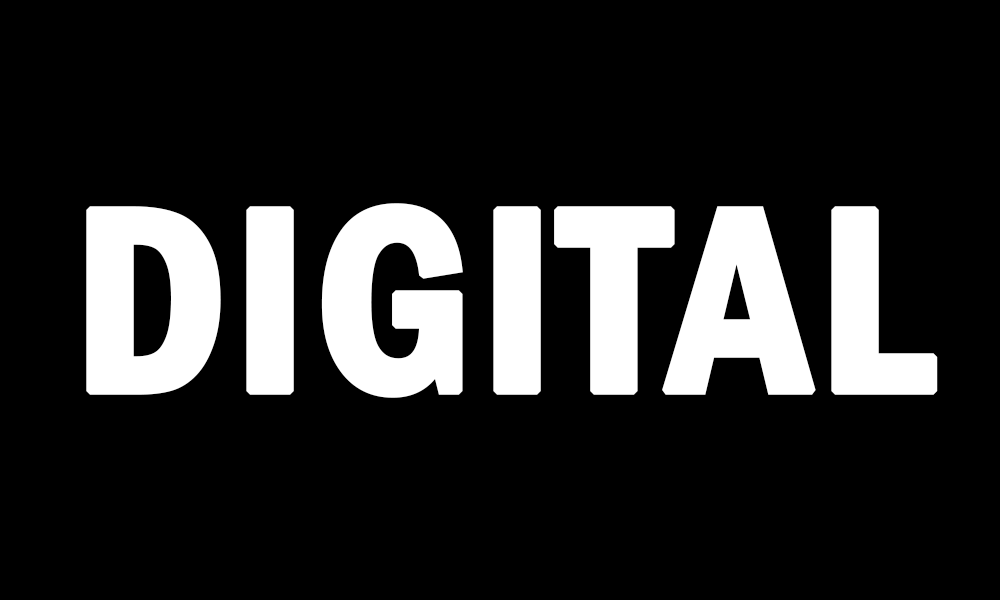
<style>
.page{position:relative;width:1000px;height:600px;background:#000000}
.page>*{position:absolute;margin:0}
.t1{font:272px "FranklinGothic-DemiCond";color:#ffffff;font-weight:bold}
</style>
<div class="page">
<p class="t1" style="left:86px;top:203px;width:852px;height:195px">DIGITAL</p>
</div>
